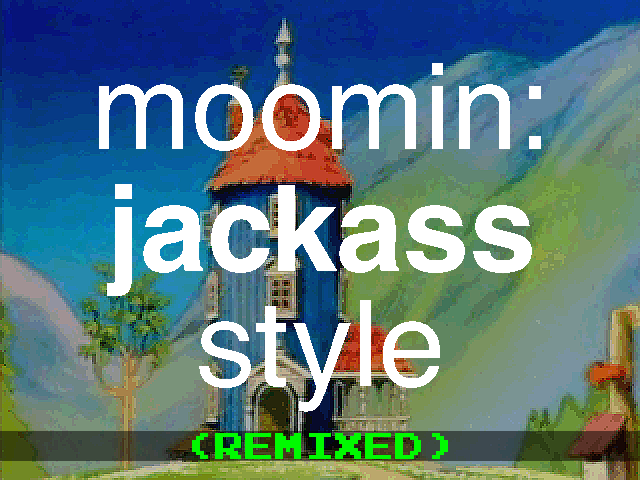
<style>
.page{position:relative;width:640px;height:480px}
.page>*{position:absolute;margin:0}
.t1{font:120px "HelveticaCE-Regular";color:#ffffff}
.t2{font:120px "HelveticaCE-Bold";color:#ffffff}
.t3{font:30px "PressStartK";color:#00fa00}
</style>
<div class="page">
<p class="t1" style="left:99px;top:63px;width:442px;height:88px">moomin:</p>
<p class="t2" style="left:107px;top:184px;width:425px;height:112px">jackass</p>
<p class="t1" style="left:199px;top:300px;width:241px;height:112px">style</p>
<p class="t3" style="left:192px;top:433px;width:256px;height:26px">(REMIXED)</p>
</div>
